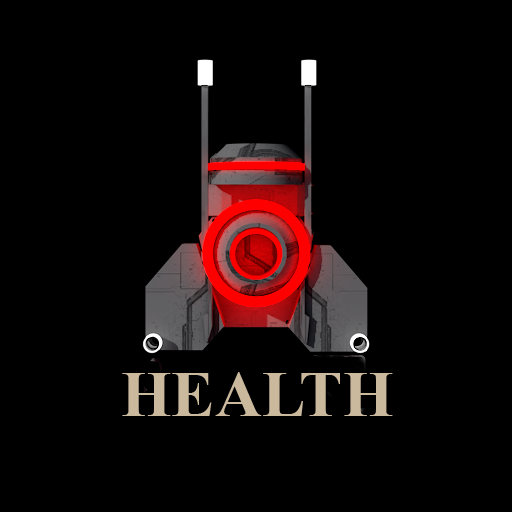
<style>
.page{position:relative;width:512px;height:512px;background:#000000}
.page>*{position:absolute;margin:0}
.t1{font:65px "TimesNewRomanPS-BoldMT";color:#cbb99d}
</style>
<div class="page">
<p class="t1" style="left:122px;top:372px;width:271px;height:44px">HEALTH</p>
</div>
